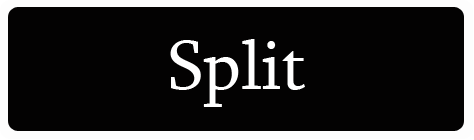
<style>
.page{position:relative;width:474px;height:140px;background:#030202}
.page>*{position:absolute;margin:0}
.t1{font:72px "Sylfaen";color:#ffffff}
</style>
<div class="page">
<p class="t1" style="left:170px;top:39px;width:135px;height:68px">Split</p>
</div>
